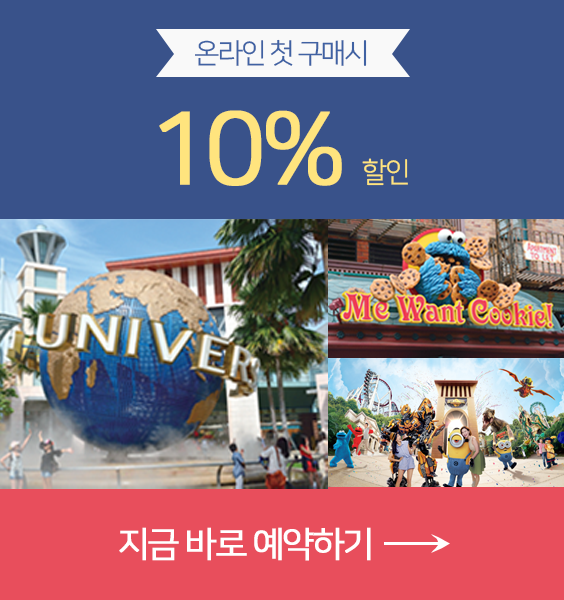
<style>
.page{position:relative;width:564px;height:600px;background:#39528a}
.page>*{position:absolute;margin:0}
.t1{font:28px "NanumSquareR";letter-spacing:-0.075em;color:#4062a3}
.t2{font:100px "NanumSquareR";letter-spacing:-0.075em;color:#ffe47e;font-weight:bold}
.t3{font:28px "NanumSquareR";letter-spacing:-0.075em;color:#ffe47e}
.t4{font:35px "NanumSquareR";letter-spacing:-0.075em;color:#ffffff;font-weight:bold}
</style>
<div class="page">
<p class="t1" style="left:195px;top:39px;width:172px;height:27px">온라인 첫 구매시</p>
<p class="t2" style="left:159px;top:110px;width:249px;height:76px">10% <span class="t3">할인</span></p>
<p class="t4" style="left:119px;top:527px;width:252px;height:34px">지금 바로 예약하기</p>
</div>
